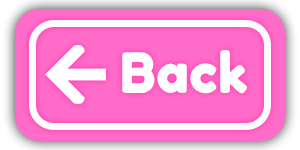
<style>
.page{position:relative;width:300px;height:150px;background:#ff6bc8}
.page>*{position:absolute;margin:0}
.t1{font:55.6px "ForkdokaOne-Regular";color:#ffffff}
</style>
<div class="page">
<p class="t1" style="left:122px;top:50px;width:125px;height:44px">Back</p>
</div>
